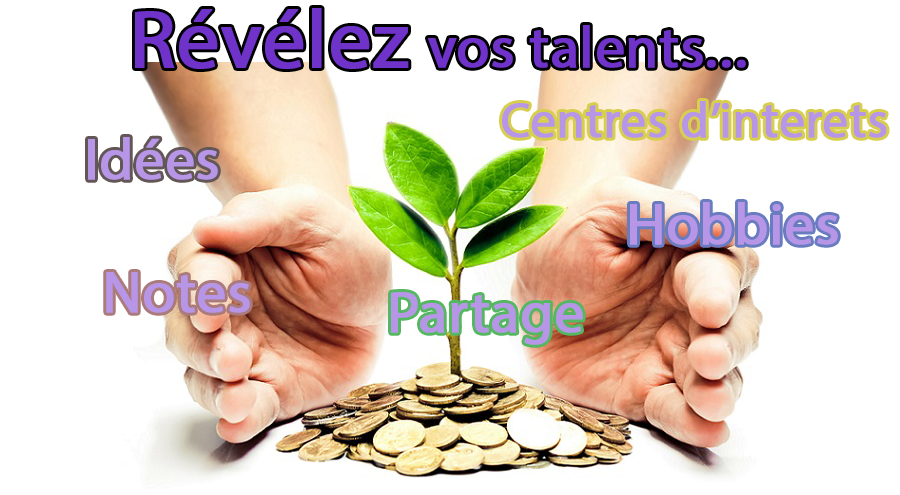
<style>
.page{position:relative;width:900px;height:495px;background:#ffffff}
.page>*{position:absolute;margin:0}
.t1{font:58.3px "MyriadHebrew-Regular";color:#6f33ca;font-weight:bold}
.t2{font:83.3px "MyriadHebrew-Regular";color:#6f33ca;font-weight:bold}
.t3{font:50px "MyriadHebrew-Regular";color:#b796e8;font-weight:bold}
.t4{font:58.3px "MyriadHebrew-Regular";color:#b796e8;font-weight:bold}
</style>
<div class="page">
<p class="t1" style="left:135px;top:8px;width:611px;height:61px"><span class="t2">Révélez </span>vos talents...</p>
<p class="t3" style="left:502px;top:101px;width:385px;height:37px">Centres d’interets</p>
<p class="t4" style="left:88px;top:137px;width:130px;height:43px">Idées</p>
<p class="t4" style="left:106px;top:272px;width:144px;height:41px">Notes</p>
<p class="t4" style="left:391px;top:292px;width:192px;height:53px">Partage</p>
</div>
